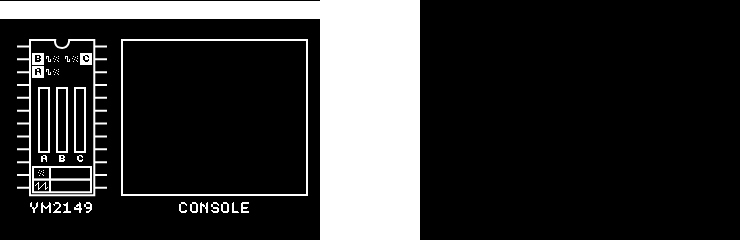
<style>
.page{position:relative;width:740px;height:240px;background:#000000}
.page>*{position:absolute;margin:0}
.t1{font:12px "Silkscreen";color:#000000}
.t2{font:12px "Silkscreen";color:#ffffff}
.t3{font:12px "Dogica_Pixel";color:#ffffff}
</style>
<div class="page">
<p class="t1" style="left:35px;top:54px;width:7px;height:8px">B</p>
<p class="t1" style="left:83px;top:54px;width:7px;height:8px">C</p>
<p class="t1" style="left:35px;top:67px;width:7px;height:8px">A</p>
<p class="t2" style="left:41px;top:155px;width:6px;height:7px">A</p>
<p class="t2" style="left:59px;top:154px;width:7px;height:8px">B</p>
<p class="t2" style="left:77px;top:154px;width:7px;height:8px">C</p>
<p class="t3" style="left:30px;top:202px;width:63px;height:12px">YM2149</p>
<p class="t3" style="left:179px;top:202px;width:71px;height:12px">CONSOLE</p>
</div>
